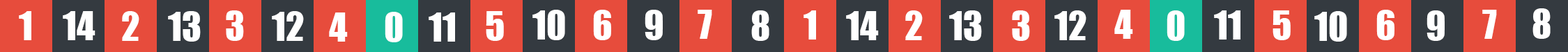
<style>
.page{position:relative;width:1568px;height:52px;background:#e74c3c}
.page>*{position:absolute;margin:0}
.t1{font:37.2px "Impact";color:#ffffff}
</style>
<div class="page">
<p class="t1" style="left:19px;top:11px;width:12px;height:29px">1</p>
<p class="t1" style="left:63px;top:11px;width:32px;height:29px">14</p>
<p class="t1" style="left:122px;top:11px;width:17px;height:30px">2</p>
<p class="t1" style="left:168px;top:11px;width:33px;height:31px">13</p>
<p class="t1" style="left:226px;top:10px;width:18px;height:31px">3</p>
<p class="t1" style="left:272px;top:11px;width:32px;height:30px">12</p>
<p class="t1" style="left:329px;top:13px;width:19px;height:29px">4</p>
<p class="t1" style="left:385px;top:12px;width:18px;height:31px">0</p>
<p class="t1" style="left:429px;top:13px;width:26px;height:29px">11</p>
<p class="t1" style="left:486px;top:11px;width:18px;height:30px">5</p>
<p class="t1" style="left:532px;top:10px;width:33px;height:30px">10</p>
<p class="t1" style="left:593px;top:10px;width:18px;height:30px">6</p>
<p class="t1" style="left:645px;top:10px;width:18px;height:30px">9</p>
<p class="t1" style="left:698px;top:10px;width:14px;height:29px">7</p>
<p class="t1" style="left:751px;top:10px;width:18px;height:31px">8</p>
<p class="t1" style="left:804px;top:10px;width:12px;height:30px">1</p>
<p class="t1" style="left:846px;top:11px;width:33px;height:29px">14</p>
<p class="t1" style="left:905px;top:10px;width:18px;height:30px">2</p>
<p class="t1" style="left:949px;top:10px;width:33px;height:31px">13</p>
<p class="t1" style="left:1012px;top:10px;width:18px;height:31px">3</p>
<p class="t1" style="left:1054px;top:10px;width:32px;height:30px">12</p>
<p class="t1" style="left:1114px;top:10px;width:19px;height:29px">4</p>
<p class="t1" style="left:1167px;top:10px;width:18px;height:31px">0</p>
<p class="t1" style="left:1214px;top:10px;width:26px;height:30px">11</p>
<p class="t1" style="left:1273px;top:10px;width:18px;height:30px">5</p>
<p class="t1" style="left:1314px;top:11px;width:33px;height:31px">10</p>
<p class="t1" style="left:1376px;top:10px;width:18px;height:30px">6</p>
<p class="t1" style="left:1427px;top:10px;width:18px;height:31px">9</p>
<p class="t1" style="left:1482px;top:10px;width:15px;height:29px">7</p>
<p class="t1" style="left:1532px;top:8px;width:19px;height:31px">8</p>
</div>
